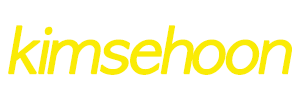
<style>
.page{position:relative;width:300px;height:100px;background:#ffffff}
.page>*{position:absolute;margin:0}
.t1{font:60px "AppleGothic";letter-spacing:-0.025em;color:#faeb05;font-weight:bold;font-style:italic}
</style>
<div class="page">
<p class="t1" style="left:8px;top:25px;width:284px;height:50px">kimsehoon</p>
</div>
